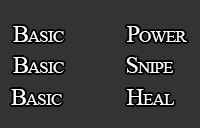
<style>
.page{position:relative;width:200px;height:128px;background:#333333}
.page>*{position:absolute;margin:0}
.t1{font:24.4px "TimesNewRomanPSMT";letter-spacing:-0.05em;color:#ffffff;font-variant:small-caps}
</style>
<div class="page">
<p class="t1" style="left:13px;top:26px;width:51px;height:16px">Basic</p>
<p class="t1" style="left:127px;top:26px;width:60px;height:16px">Power</p>
<p class="t1" style="left:13px;top:57px;width:51px;height:16px">Basic</p>
<p class="t1" style="left:126px;top:57px;width:47px;height:16px">Snipe</p>
<p class="t1" style="left:11px;top:89px;width:51px;height:16px">Basic</p>
<p class="t1" style="left:126px;top:89px;width:49px;height:16px">Heal</p>
</div>
